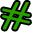
<style>
.page{position:relative;width:32px;height:32px;background:#ffffff}
.page>*{position:absolute;margin:0}
.t1{font:34px "CalifornianFB-Bold";color:#2aa000;font-weight:bold;scale:1.42 1}
</style>
<div class="page">
<p class="t1" style="left:2px;top:2px;width:28px;height:28px">#</p>
</div>
